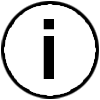
<style>
.page{position:relative;width:100px;height:100px;background:#ffffff}
.page>*{position:absolute;margin:0}
.t1{font:85.7px "AkzidenzGroteskBE-Md";color:#000000}
</style>
<div class="page">
<p class="t1" style="left:43px;top:19px;width:11px;height:60px">i</p>
</div>
